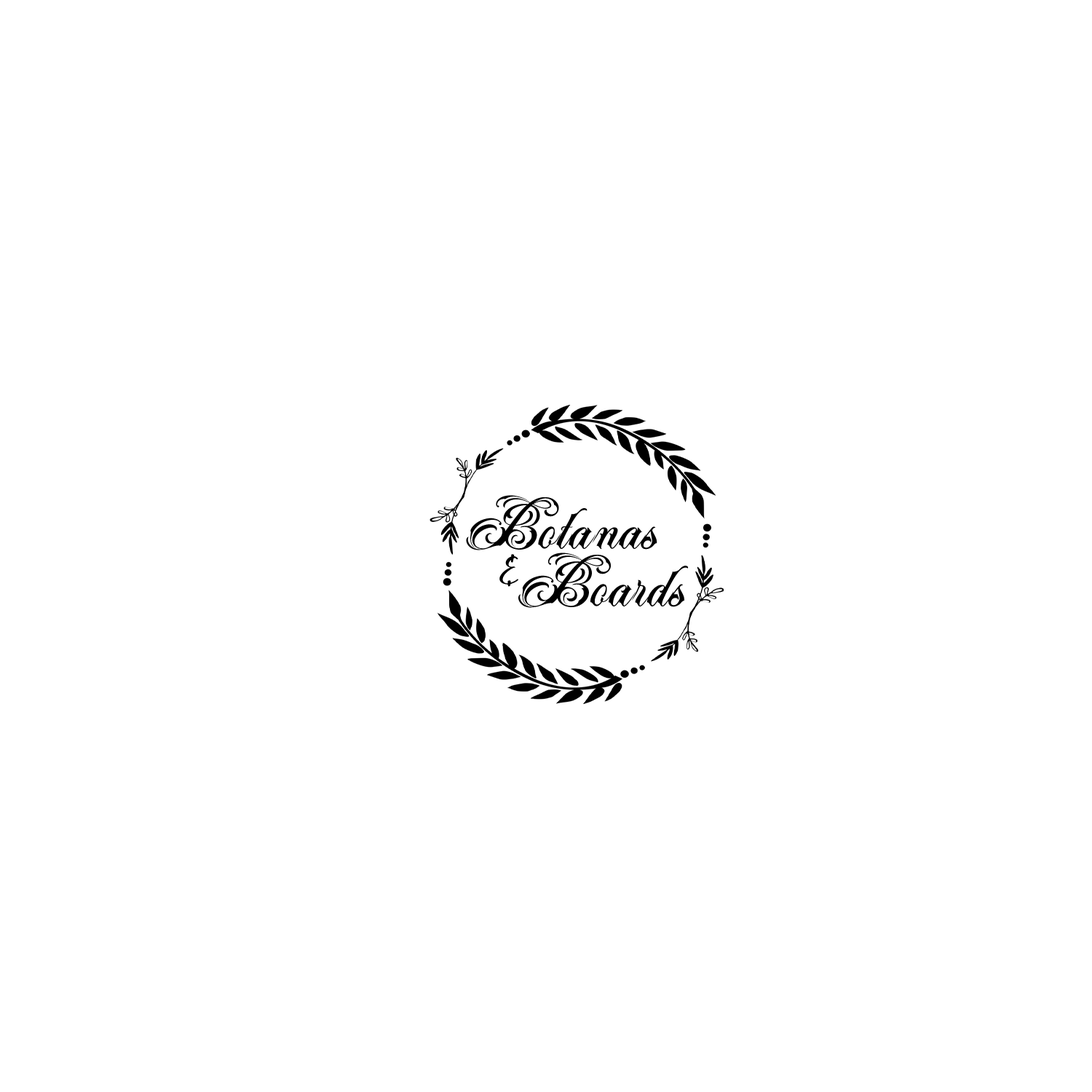
<style>
.page{position:relative;width:1092px;height:1092px;background:#ffffff}
.page>*{position:absolute;margin:0}
.t1{font:69.9px "AcuentrePersonalUseOnly-Regular";letter-spacing:0.02em;color:#000000;scale:1.04 1}
.t2{font:58.2px "Magnolia";letter-spacing:0.02em;color:#000000;scale:1.04 1}
</style>
<div class="page">
<p class="t1" style="left:466px;top:495px;width:191px;height:55px">Botanas</p>
<p class="t2" style="left:499px;top:554px;width:19px;height:33px">&amp;</p>
<p class="t1" style="left:518px;top:553px;width:171px;height:55px">Boards</p>
</div>
